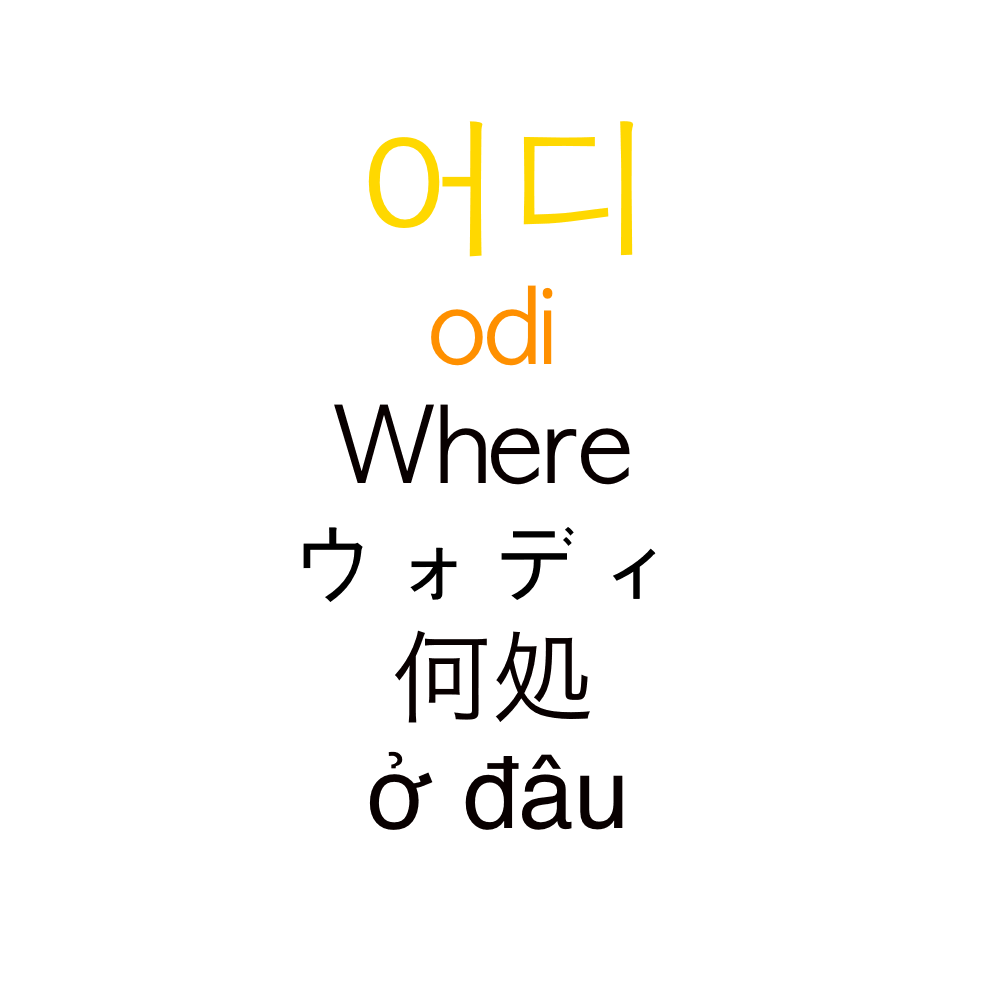
<style>
.page{position:relative;width:1000px;height:1000px;background:#ffffff}
.page>*{position:absolute;margin:0}
.t1{font:150px "AppleGothic";color:#ffd800}
.t2{font:100px "AppleGothic";color:#ff9000}
.t3{font:100px "AppleGothic";color:#080000}
.t4{font:100px "AppleGothic";color:#000000}
.t5{font:100px "HiraKakuProN-W3";color:#080000}
.t6{font:100px "Helvetica";color:#080000}
</style>
<div class="page">
<p class="t1" style="left:368px;top:121px;width:266px;height:136px">어디</p>
<p class="t2" style="left:431px;top:285px;width:122px;height:81px">odi</p>
<p class="t3" style="left:334px;top:404px;width:296px;height:81px">Where</p>
<p class="t4" style="left:303px;top:527px;width:353px;height:75px">ウォディ</p>
<p class="t5" style="left:395px;top:630px;width:195px;height:93px">何処</p>
<p class="t6" style="left:369px;top:751px;width:254px;height:79px">ở đâu</p>
</div>
